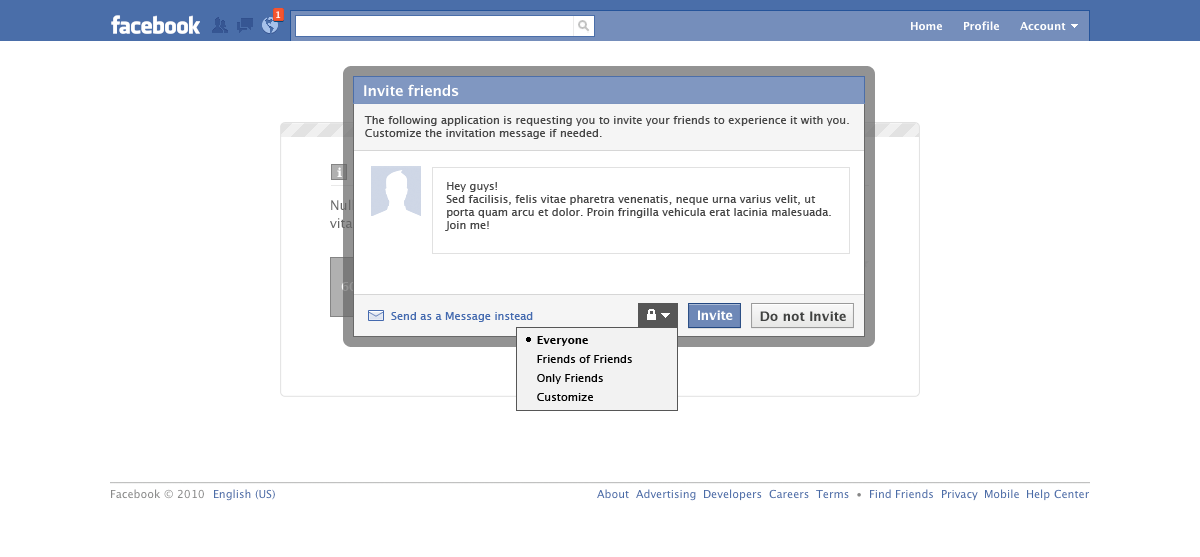
<style>
.page{position:relative;width:1200px;height:557px;background:#ffffff}
.page>*{position:absolute;margin:0}
.t1{font:14.5px "LucidaGrande-Bold";letter-spacing:-0.02em;color:#ffffff}
.t2{font:11px "LucidaGrande";color:#454545}
.t3{font:11px "LucidaGrande";color:#446aaf}
.t4{font:13px "LucidaGrande-Bold";letter-spacing:-0.02em;color:#ffffff}
.t5{font:13px "LucidaGrande-Bold";color:#414241}
.t6{font:11px/19px "LucidaGrande";color:#000000}
.t7{font:11px/19px "LucidaGrande-Bold";color:#000000}
</style>
<div class="page">
<p class="t1" style="left:364px;top:84px;width:95px;height:12px">Invite friends</p>
<p class="t2" style="left:364px;top:116px;width:485px;height:23px">The following application is requesting you to invite your friends to experience it with you.<br>Customize the invitation message if needed.</p>
<p class="t2" style="left:445px;top:182px;width:386px;height:49px">Hey guys!<br>Sed facilisis, felis vitae pharetra venenatis, neque urna varius velit, ut porta quam arcu et dolor. Proin fringilla vehicula erat lacinia malesuada.<br>Join me!</p>
<p class="t3" style="left:391px;top:312px;width:142px;height:10px">Send as a Message instead</p>
<p class="t4" style="left:698px;top:310px;width:35px;height:10px">Invite</p>
<p class="t5" style="left:760px;top:311px;width:86px;height:10px">Do not Invite</p>
<p class="t6" style="left:537px;top:336px;width:95px;height:65px"><span class="t7">Everyone<br></span>Friends of Friends<br>Only Friends<br>Customize</p>
</div>
